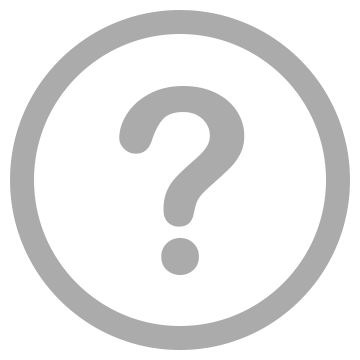
<style>
.page{position:relative;width:360px;height:360px;background:#ffffff}
.page>*{position:absolute;margin:0}
.t1{font:256px "ArialRoundedMTBold";color:#ababab}
</style>
<div class="page">
<p class="t1" style="left:119px;top:86px;width:126px;height:189px">?</p>
</div>
